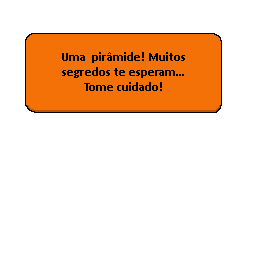
<style>
.page{position:relative;width:256px;height:256px;background:#ffffff}
.page>*{position:absolute;margin:0}
.t1{font:12.5px "Calibri-Bold";color:#000000}
</style>
<div class="page">
<p class="t1" style="left:62px;top:52px;width:123px;height:39px;text-align:center">Uma  pirâmide! Muitos<br>segredos te esperam...<br>Tome cuidado!</p>
</div>
